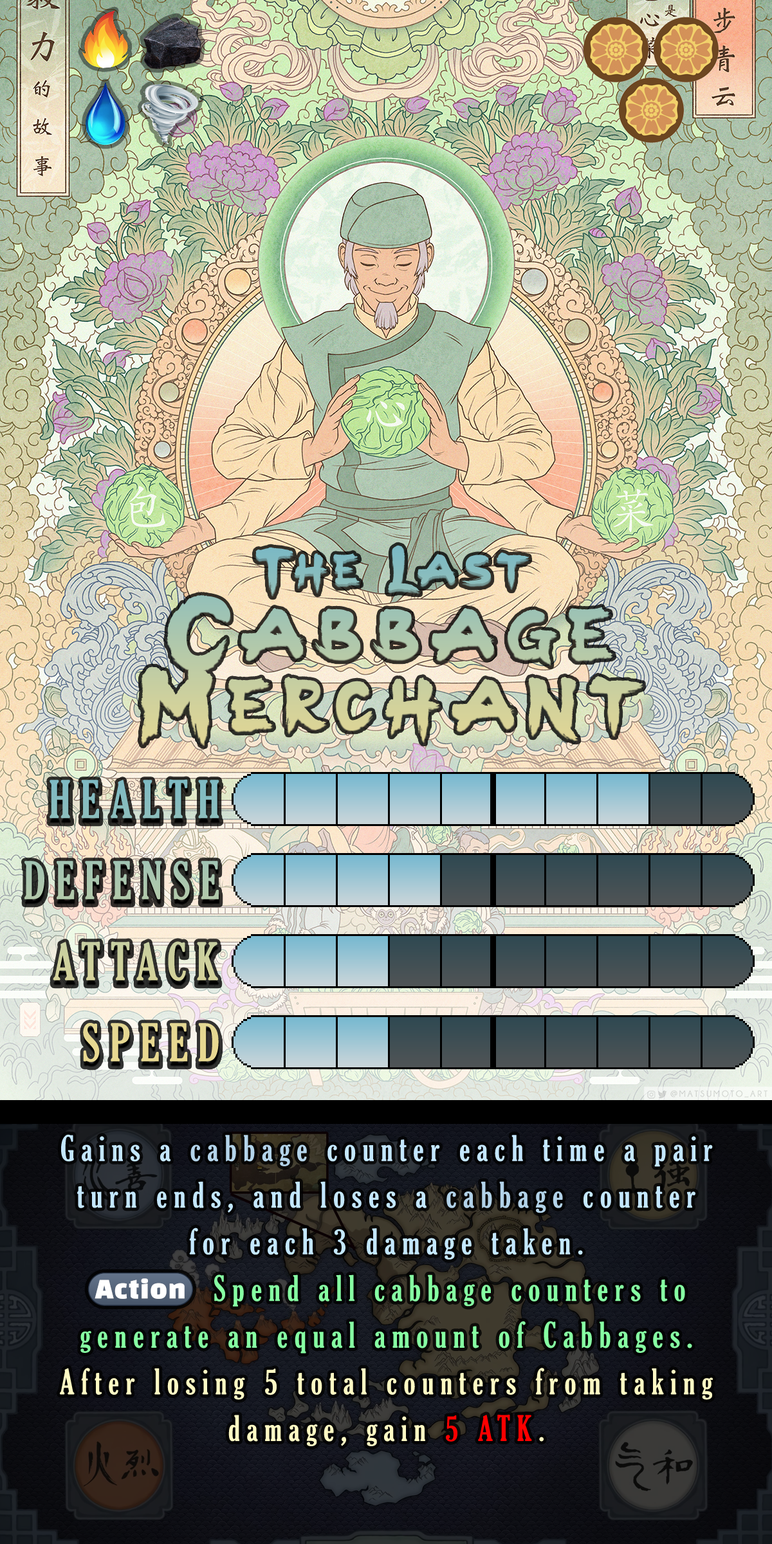
<style>
.page{position:relative;width:772px;height:1544px}
.page>*{position:absolute;margin:0}
.t1{font:119.1px "AvatarAirbender";letter-spacing:0.08em;color:#85bcc0}
.t2{font:86.1px "GloucesterMT-ExtraCondensed";letter-spacing:0.2em;color:#85bcc0}
.t3{font:86.1px "GloucesterMT-ExtraCondensed";letter-spacing:0.2em;color:#aac6ae}
.t4{font:86.1px "GloucesterMT-ExtraCondensed";letter-spacing:0.2em;color:#ced19d}
.t5{font:86.1px "GloucesterMT-ExtraCondensed";letter-spacing:0.2em;color:#e7d891}
.t6{font:58.6px/46.7px "GloucesterMT-ExtraCondensed";letter-spacing:0.2em;color:#86ffa2}
.t7{font:58.6px/46.7px "GloucesterMT-ExtraCondensed";letter-spacing:0.2em;color:#c4e7ff}
.t8{font:58.6px/46.7px "GloucesterMT-ExtraCondensed";letter-spacing:0.2em;color:#b4d4ea}
.t9{font:58.6px/46.7px "GloucesterMT-ExtraCondensed";letter-spacing:0.2em;color:#b2d2e8}
.t10{font:58.6px/46.7px "stoogedings-Regular";letter-spacing:0.2em;color:#86ffa2}
.t11{font:58.6px/46.7px "GloucesterMT-ExtraCondensed";letter-spacing:0.2em;color:#fffac4}
.t12{font:58.6px/46.7px "GloucesterMT-ExtraCondensed";letter-spacing:0.2em;color:#ff0000}
</style>
<div class="page">
<p class="t1" style="left:255px;top:545px;width:274px;height:49px">The Last</p>
<p class="t2" style="left:50px;top:779px;width:169px;height:39px">HEALTH</p>
<p class="t3" style="left:24px;top:861px;width:195px;height:39px">DEFENSE</p>
<p class="t4" style="left:53px;top:941px;width:165px;height:40px">ATTACK</p>
<p class="t5" style="left:83px;top:1023px;width:136px;height:39px">SPEED</p>
<p class="t6" style="left:60px;top:1134px;width:653px;height:312px;text-align:center"><span class="t7">Gains a </span><span class="t8">cabbage </span><span class="t7">counter each time a pair turn ends, and loses a </span><span class="t9">cabbage </span><span class="t7">counter for each 3 damage taken.<br></span><span class="t10">(Action)</span> Spend all cabbage counters to generate an equal amount of Cabbages.<br><span class="t11">After losing 5 total counters from taking damage, gain </span><span class="t12">5 ATK</span><span class="t11">.</span></p>
</div>
